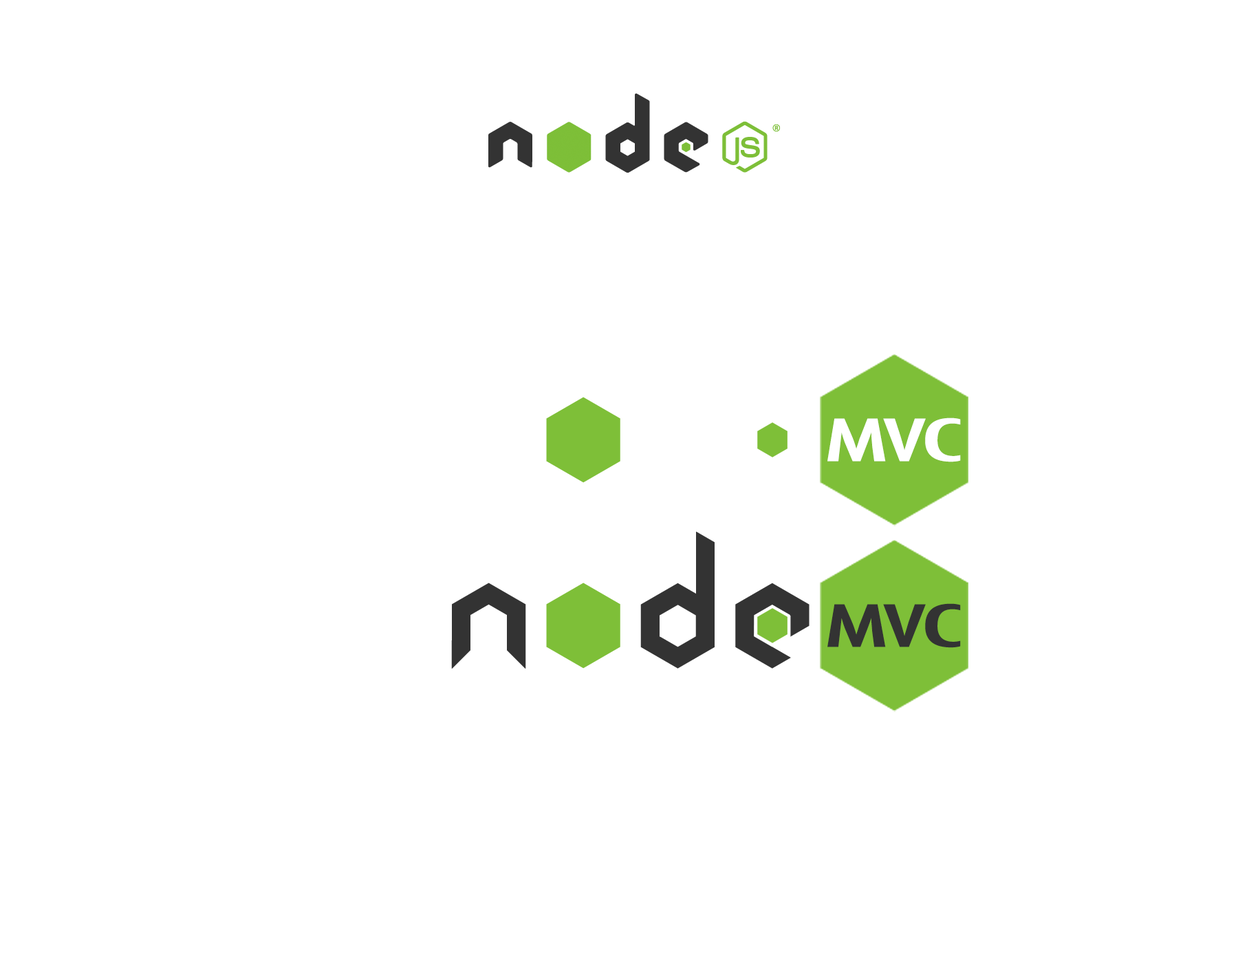
<style>
.page{position:relative;width:1238px;height:963px;background:#ffffff}
.page>*{position:absolute;margin:0}
.t1{font:56.3px "Futura-CondensedMedium";letter-spacing:-0.04em;color:#ffffff;scale:2 1}
.t2{font:56.3px "Futura-CondensedMedium";letter-spacing:-0.04em;color:#333333;scale:2 1}
</style>
<div class="page">
<p class="t1" style="left:828px;top:418px;width:133px;height:44px">MVC</p>
<p class="t2" style="left:828px;top:603px;width:133px;height:45px">MVC</p>
</div>
